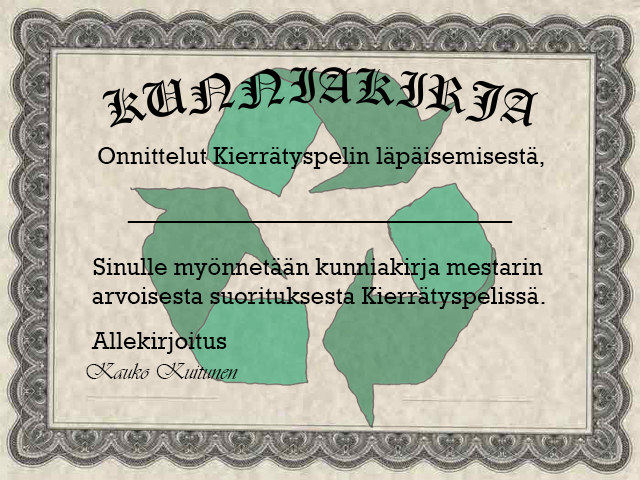
<style>
.page{position:relative;width:640px;height:480px}
.page>*{position:absolute;margin:0}
.t1{font:24px "Rockwell";color:#000000}
.t2{font:48px "Rockwell";color:#000000}
.t3{font:24px "Vivaldii";color:#000000}
</style>
<div class="page">
<p class="t1" style="left:98px;top:147px;width:446px;height:22px">Onnittelut Kierrätyspelin läpäisemisestä,</p>
<p class="t2" style="left:127px;top:221px;width:386px;height:2px">________________</p>
<p class="t1" style="left:92px;top:258px;width:453px;height:51px;text-align:center">Sinulle myönnetään kunniakirja mestarin<br>arvoisesta suorituksesta Kierrätyspelissä.</p>
<p class="t1" style="left:91px;top:332px;width:136px;height:22px">Allekirjoitus</p>
<p class="t3" style="left:86px;top:362px;width:152px;height:17px">Kauko Kuitunen</p>
</div>
